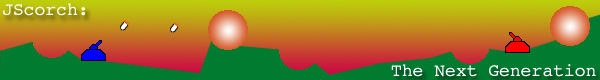
<style>
.page{position:relative;width:600px;height:80px;background:#007b2f}
.page>*{position:absolute;margin:0}
.t1{font:18px "Courier";color:#ffffff}
</style>
<div class="page">
<p class="t1" style="left:3px;top:3px;width:82px;height:13px">JScorch:</p>
<p class="t1" style="left:391px;top:64px;width:205px;height:13px">The Next Generation</p>
</div>
